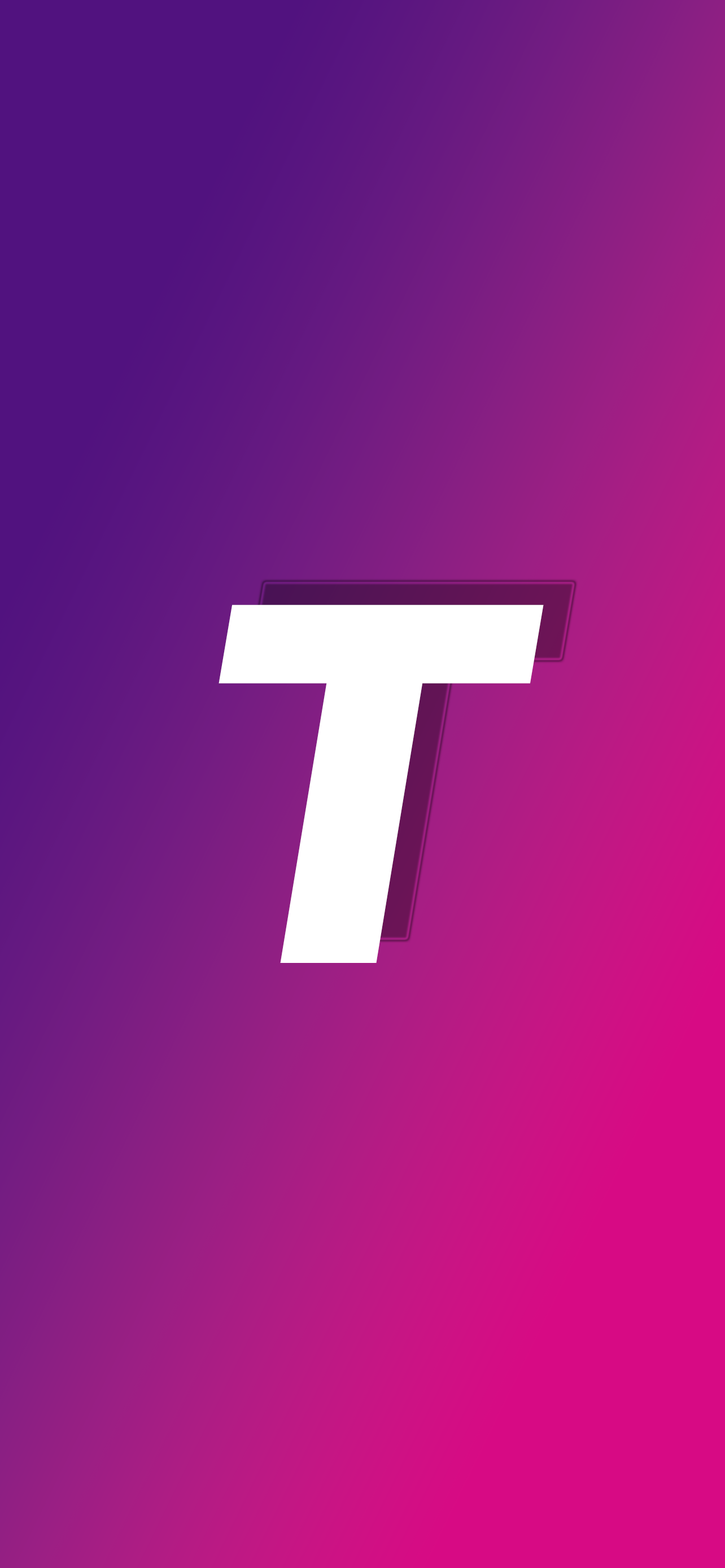
<style>
.page{position:relative;width:725px;height:1568px}
.page>*{position:absolute;margin:0}
.t1{font:491.9px "Inter-BlackItalic";color:#ffffff}
</style>
<div class="page">
<p class="t1" style="left:218px;top:605px;width:326px;height:358px">T</p>
</div>
